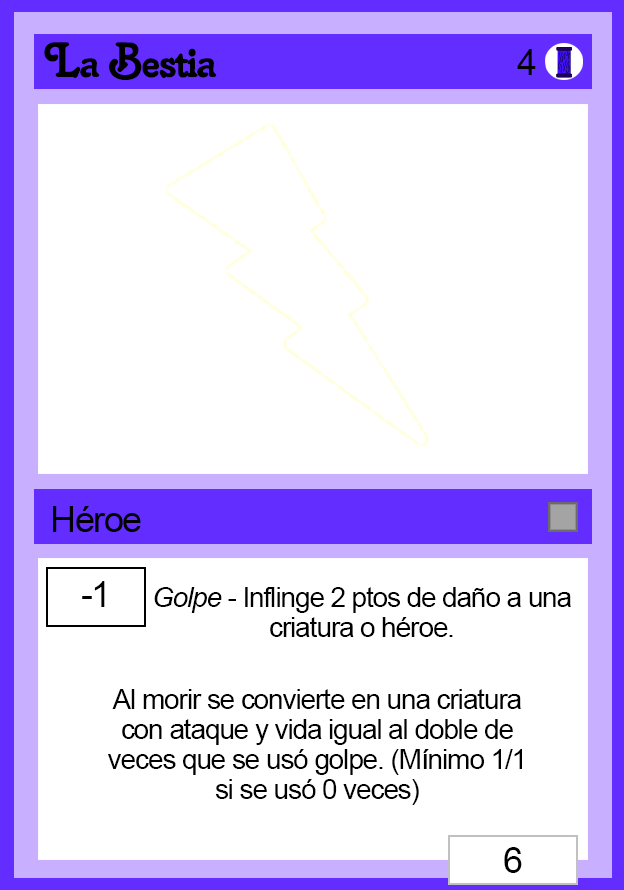
<style>
.page{position:relative;width:624px;height:890px;background:#ffffff}
.page>*{position:absolute;margin:0}
.t1{font:48px "Salina";letter-spacing:-0.04em;color:#000000}
.t2{font:36px "ArialMT";letter-spacing:-0.04em;color:#000000}
.t3{font:28px/30px "ArialMT";letter-spacing:-0.04em;color:#000000}
.t4{font:28px/30px "Arial-ItalicMT";letter-spacing:-0.04em;color:#000000}
</style>
<div class="page">
<p class="t1" style="left:44px;top:42px;width:173px;height:38px">La Bestia</p>
<p class="t2" style="left:517px;top:49px;width:19px;height:26px">4</p>
<p class="t2" style="left:53px;top:506px;width:88px;height:26px">Héroe</p>
<p class="t2" style="left:82px;top:581px;width:23px;height:26px">-1</p>
<p class="t3" style="left:154px;top:587px;width:417px;height:50px;text-align:center"><span class="t4">Golpe </span>- Inflinge 2 ptos de daño a una criatura o héroe.</p>
<p class="t3" style="left:108px;top:689px;width:414px;height:116px;text-align:center">Al morir se convierte en una criatura con ataque y vida igual al doble de veces que se usó golpe. (Mínimo 1/1 si se usó 0 veces)</p>
<p class="t2" style="left:504px;top:847px;width:18px;height:26px">6</p>
</div>
